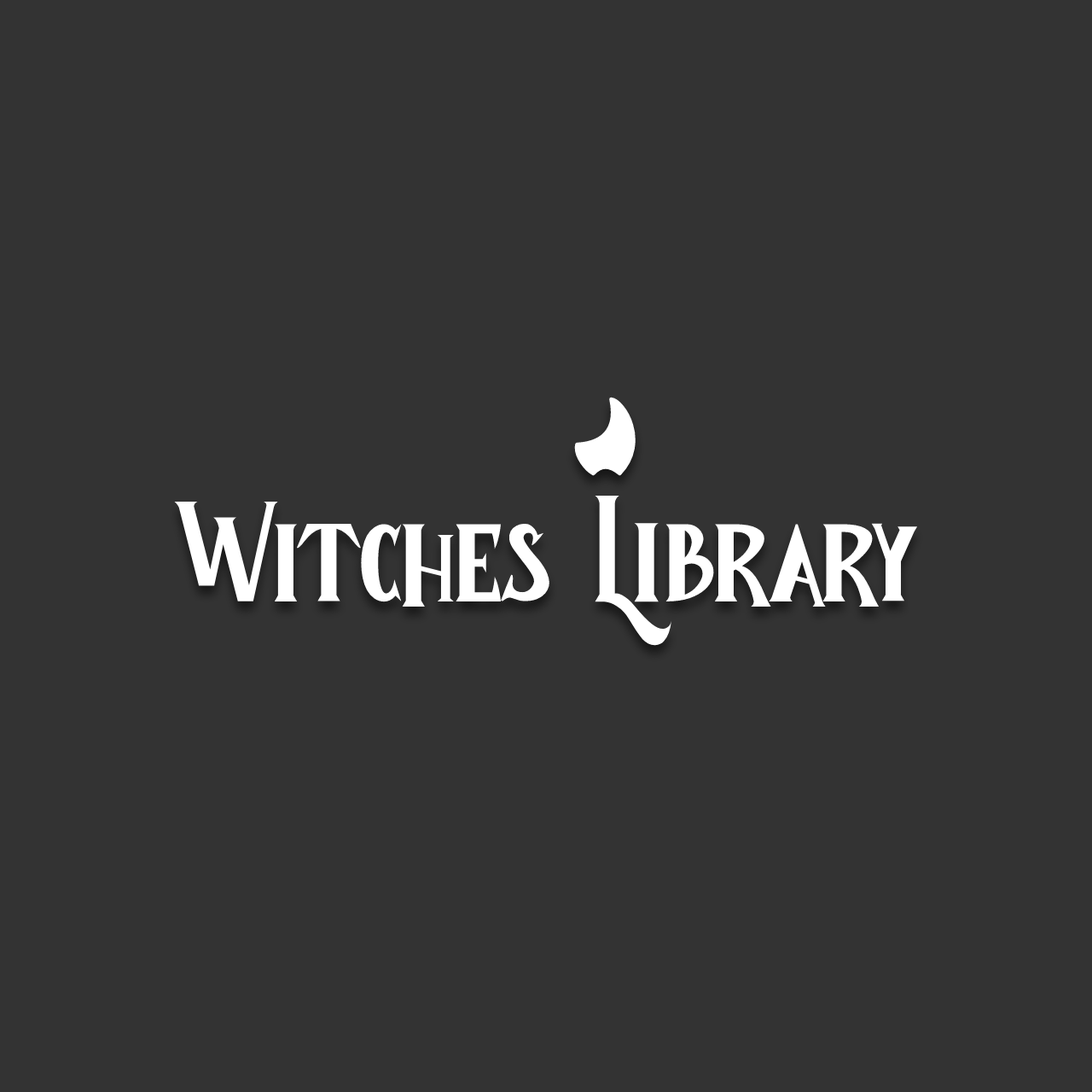
<style>
.page{position:relative;width:1092px;height:1092px;background:#333333}
.page>*{position:absolute;margin:0}
.t1{font:142.6px "ChildWitchRegular";color:#ffffff}
</style>
<div class="page">
<p class="t1" style="left:174px;top:495px;width:744px;height:151px">Witches Library</p>
</div>
